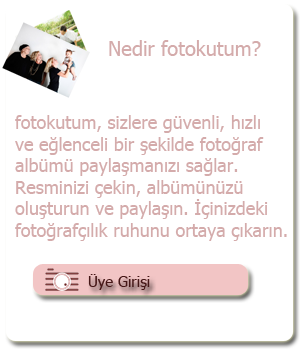
<style>
.page{position:relative;width:300px;height:350px;background:#ffffff}
.page>*{position:absolute;margin:0}
.t1{font:20px "Tahoma";color:#d4abab}
.t2{font:18px "Tahoma";color:#d4abab}
.t3{font:15px "Tahoma";color:#451717}
</style>
<div class="page">
<p class="t1" style="left:109px;top:40px;width:152px;height:16px">Nedir fotokutum?</p>
<p class="t2" style="left:15px;top:115px;width:272px;height:126px">fotokutum, sizlere güvenli, hızlı<br>ve eğlenceli bir şekilde fotoğraf<br>albümü paylaşmanızı sağlar.<br>Resminizi çekin, albümünüzü <br>oluşturun ve paylaşın. İçinizdeki<br>fotoğrafçılık ruhunu ortaya çıkarın.</p>
<p class="t3" style="left:88px;top:274px;width:62px;height:16px">Üye Girişi</p>
</div>
